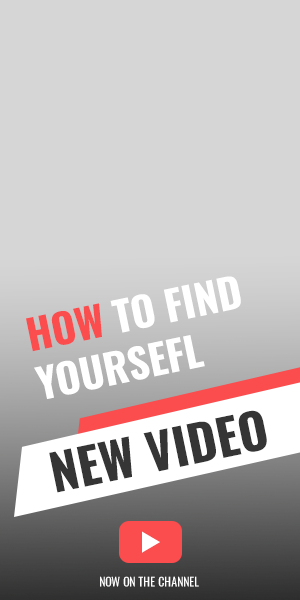
<style>
.page{position:relative;width:300px;height:600px;background:#d6d6d6}
.page>*{position:absolute;margin:0}
.t1{font:41.4px "Oswald-Bold";color:#ffffff;text-transform:uppercase}
.t2{font:41.4px "Oswald-Bold";color:#fb4c4e;text-transform:uppercase}
.t3{font:50px "Oswald-Bold";color:#353535;text-transform:uppercase}
.t4{font:12px "Oswald-Regular";color:#ffffff;text-transform:uppercase}
</style>
<div class="page">
<p class="t1" style="left:26px;top:276px;width:215px;height:123px;rotate:-12deg"><span class="t2">How</span> to find <br>yoursefl</p>
<p class="t3" style="left:49px;top:410px;width:218px;height:83px;rotate:-12deg">New video</p>
<p class="t4" style="left:100px;top:576px;width:99px;height:11px">now on the channel</p>
</div>
